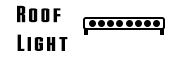
<style>
.page{position:relative;width:174px;height:60px;background:#ffffff}
.page>*{position:absolute;margin:0}
.t1{font:24px "Stark";letter-spacing:0.05em;color:#000000}
</style>
<div class="page">
<p class="t1" style="left:17px;top:5px;width:51px;height:46px;text-align:center">Roof <br>Light</p>
</div>
